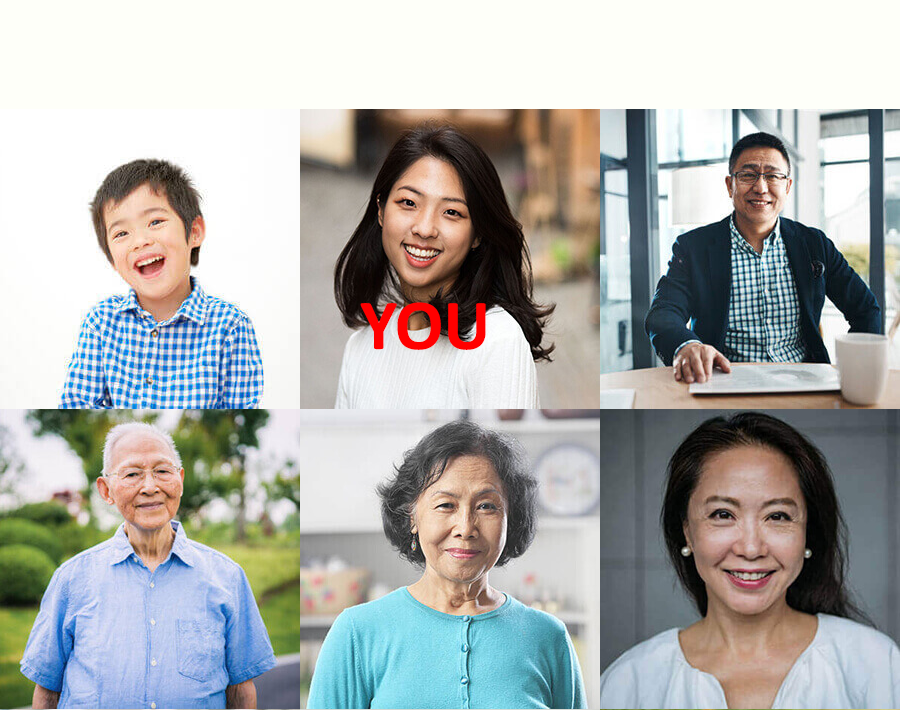
<style>
.page{position:relative;width:900px;height:710px}
.page>*{position:absolute;margin:0}
.t1{font:72px "Calibri-Bold";color:#ff0000}
</style>
<div class="page">
<p class="t1" style="left:360px;top:302px;width:126px;height:48px">YOU</p>
</div>
